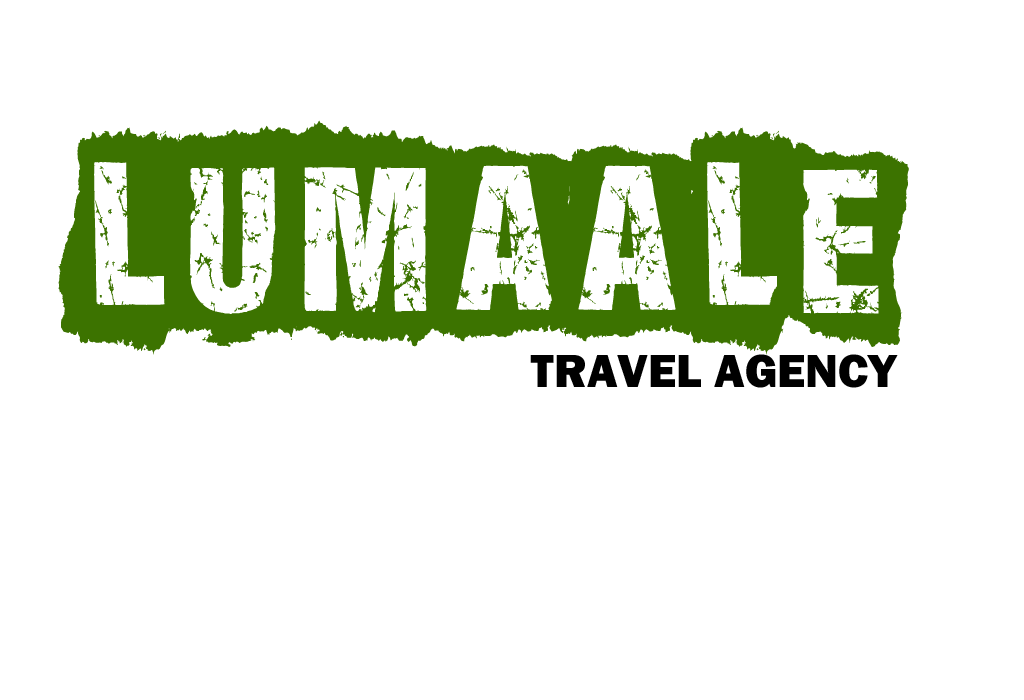
<style>
.page{position:relative;width:1024px;height:700px;background:#ffffff}
.page>*{position:absolute;margin:0}
.t1{font:200px "ALLAGESDEMO";color:#3c7300}
.t2{font:48px "FranklinGothic-Heavy";color:#000000}
</style>
<div class="page">
<p class="t1" style="left:58px;top:120px;width:851px;height:235px">Lumaale</p>
<p class="t2" style="left:530px;top:354px;width:368px;height:34px">TRAVEL AGENCY</p>
</div>
